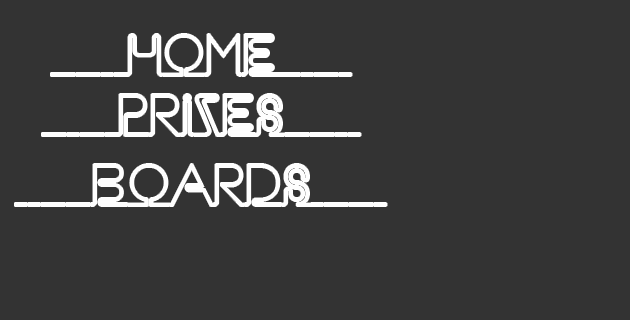
<style>
.page{position:relative;width:630px;height:320px;background:#333333}
.page>*{position:absolute;margin:0}
.t1{font:52px "Neon";color:#fefefe}
</style>
<div class="page">
<p class="t1" style="left:51px;top:34px;width:301px;height:42px">______HOME______</p>
<p class="t1" style="left:42px;top:94px;width:319px;height:42px">______PRIZES______</p>
<p class="t1" style="left:15px;top:164px;width:372px;height:42px">______BOARDS______</p>
</div>
